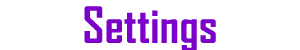
<style>
.page{position:relative;width:300px;height:50px;background:#ffffff}
.page>*{position:absolute;margin:0}
.t1{font:48px "AgencyFB-Bold";color:#7b02c9}
</style>
<div class="page">
<p class="t1" style="left:84px;top:6px;width:132px;height:46px">Settings</p>
</div>
